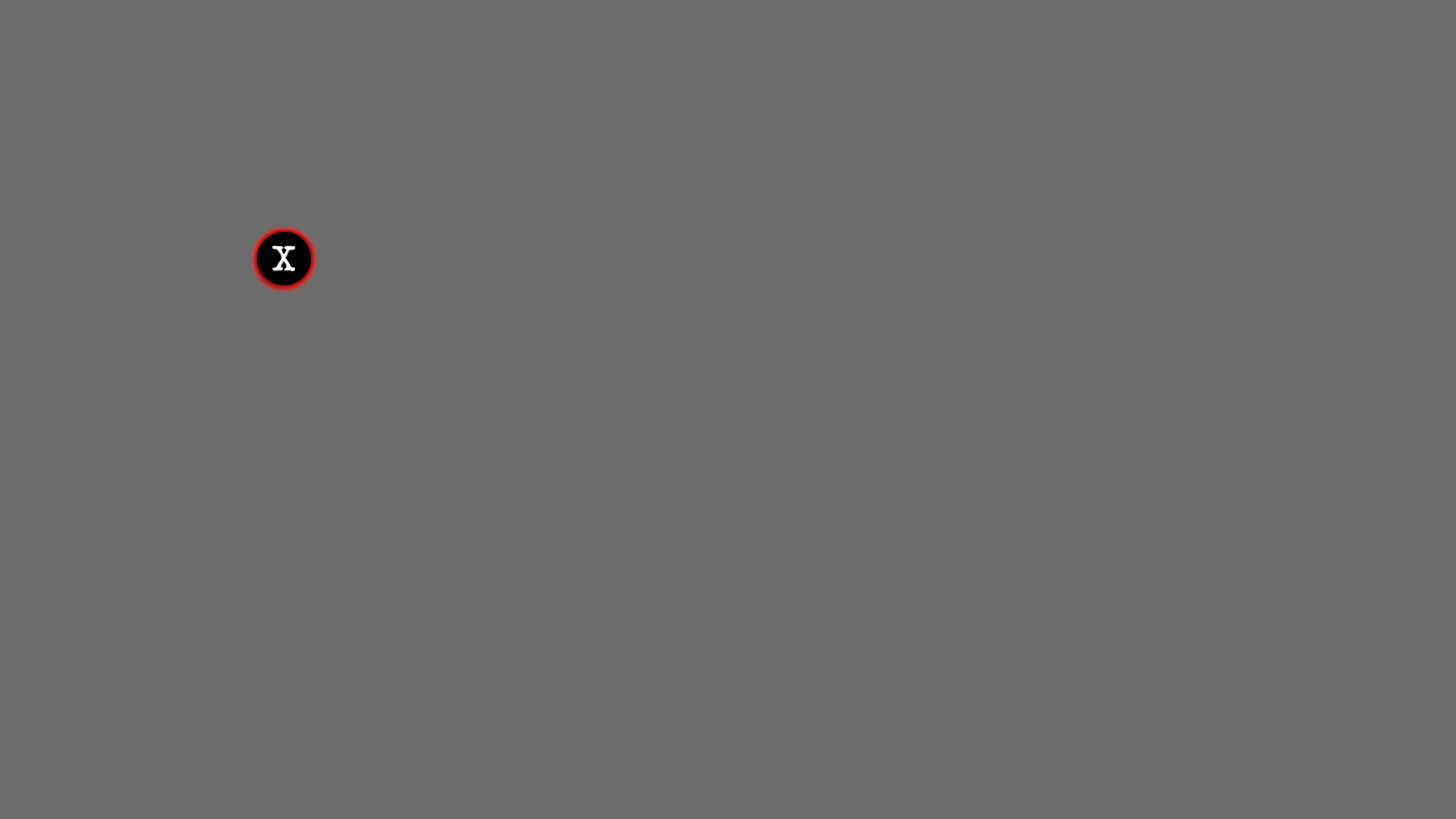
<style>
.page{position:relative;width:1456px;height:819px;background:#6c6c6c}
.page>*{position:absolute;margin:0}
.t1{font:31.9px "SilkRemington-SBold";letter-spacing:0.075em;color:#ffffff}
</style>
<div class="page">
<p class="t1" style="left:272px;top:246px;width:24px;height:26px">X</p>
</div>
